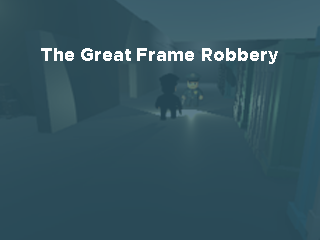
<style>
.page{position:relative;width:320px;height:240px}
.page>*{position:absolute;margin:0}
.t1{font:18px "Gotham-Bold";color:#ffffff}
</style>
<div class="page">
<p class="t1" style="left:41px;top:48px;width:237px;height:16px">The Great Frame Robbery</p>
</div>
